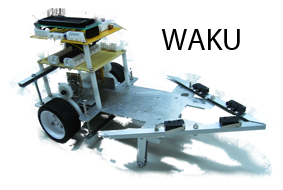
<style>
.page{position:relative;width:283px;height:190px;background:#ffffff}
.page>*{position:absolute;margin:0}
.t1{font:30.5px "MyriadPro-Regular";color:#000000}
</style>
<div class="page">
<p class="t1" style="left:161px;top:29px;width:79px;height:21px">WAKU</p>
</div>
